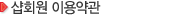
<style>
.page{position:relative;width:180px;height:18px;background:#ffffff}
.page>*{position:absolute;margin:0}
.t1{font:14.7px "YDIYGO330";letter-spacing:-0.03em;color:#373737;scale:0.92 1}
</style>
<div class="page">
<p class="t1" style="left:11px;top:1px;width:90px;height:14px">샵회원 이용약관</p>
</div>
